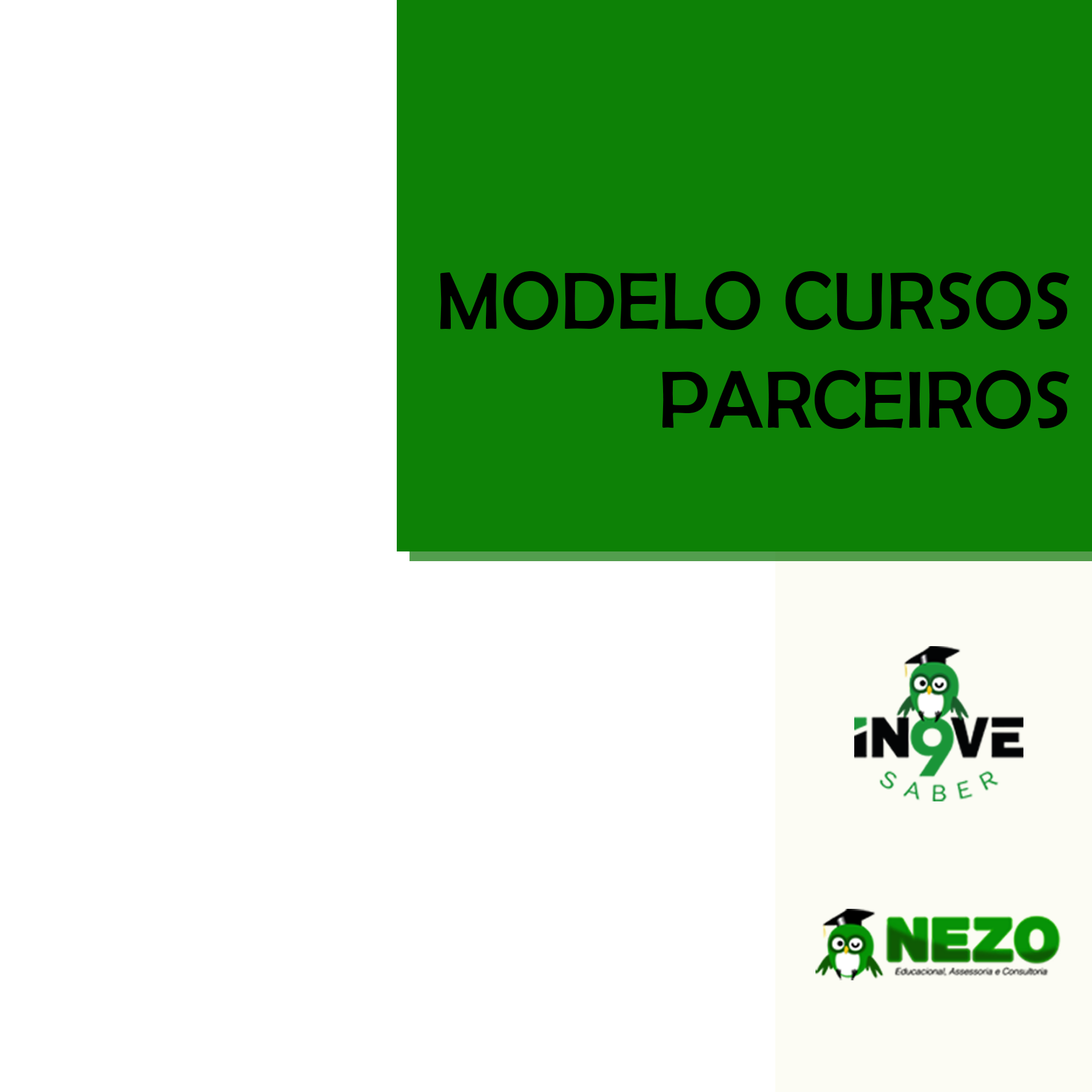
<style>
.page{position:relative;width:1092px;height:1092px;background:#ffffff}
.page>*{position:absolute;margin:0}
.t1{font:82.2px/194.1px "BerlinSansFB-Reg";color:#000000}
.t2{font:82.2px "BerlinSansFB-Reg";color:#000000}
</style>
<div class="page">
<p class="t1" style="left:440px;top:271px;width:630px;height:158px;text-align:right"><span class="t2"><br></span>MODELO CURSOS<br><span class="t2">PARCEIROS</span></p>
</div>
